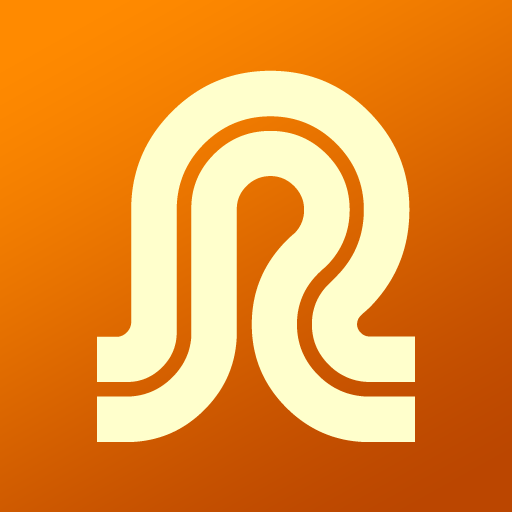
<style>
.page{position:relative;width:512px;height:512px;background:#ffffcc}
.page>*{position:absolute;margin:0}
.t1{font:380px "RetroStereoWide";letter-spacing:-0.01em;color:#ffffcc}
</style>
<div class="page">
<p class="t1" style="left:97px;top:70px;width:318px;height:372px">r</p>
</div>
